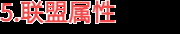
<style>
.page{position:relative;width:180px;height:34px;background:#000000}
.page>*{position:absolute;margin:0}
.t1{font:24px "WebPSD-18463539-0-Regular";color:#ef4b4b;font-weight:bold}
</style>
<div class="page">
<p class="t1" style="left:0px;top:0px;width:180px;height:34px">5.联盟属性</p>
</div>
